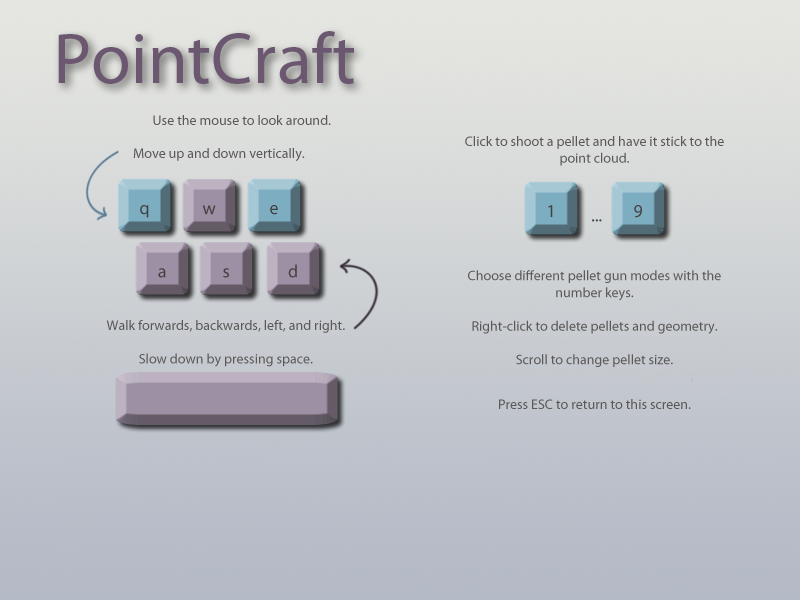
<style>
.page{position:relative;width:800px;height:600px}
.page>*{position:absolute;margin:0}
.t1{font:72px "MyriadPro-Regular";color:#6c5771}
.t2{font:14px "MyriadPro-Regular";color:#5b5858}
.t3{font:18px "MyriadPro-Regular";color:#433f3f}
.t4{font:18px "MyriadPro-Regular";color:#3d444c}
</style>
<div class="page">
<p class="t1" style="left:58px;top:31px;width:296px;height:53px">PointCraft</p>
<p class="t2" style="left:153px;top:115px;width:178px;height:10px">Use the mouse to look around.</p>
<p class="t2" style="left:465px;top:136px;width:259px;height:231px;text-align:center">Click to shoot a pellet and have it stick to the point cloud.<br><br><br><br><br><br><br>Choose different pellet gun modes with the number keys.<br><br>Right-click to delete pellets and geometry.<br><br>Scroll to change pellet size.</p>
<p class="t2" style="left:133px;top:148px;width:172px;height:13px">Move up and down vertically.</p>
<p class="t3" style="left:140px;top:205px;width:9px;height:13px">q</p>
<p class="t3" style="left:202px;top:205px;width:14px;height:10px">w</p>
<p class="t3" style="left:270px;top:205px;width:8px;height:10px">e</p>
<p class="t3" style="left:548px;top:205px;width:5px;height:12px">1</p>
<p class="t3" style="left:634px;top:205px;width:8px;height:13px">9</p>
<p class="t4" style="left:592px;top:219px;width:10px;height:3px">...</p>
<p class="t3" style="left:158px;top:268px;width:8px;height:10px">a</p>
<p class="t3" style="left:223px;top:268px;width:6px;height:10px">s</p>
<p class="t3" style="left:288px;top:264px;width:9px;height:14px">d</p>
<p class="t2" style="left:106px;top:320px;width:239px;height:47px;text-align:center">Walk forwards, backwards, left, and right.<br><br>Slow down by pressing space.</p>
<p class="t2" style="left:499px;top:399px;width:192px;height:10px">Press ESC to return to this screen.</p>
</div>
